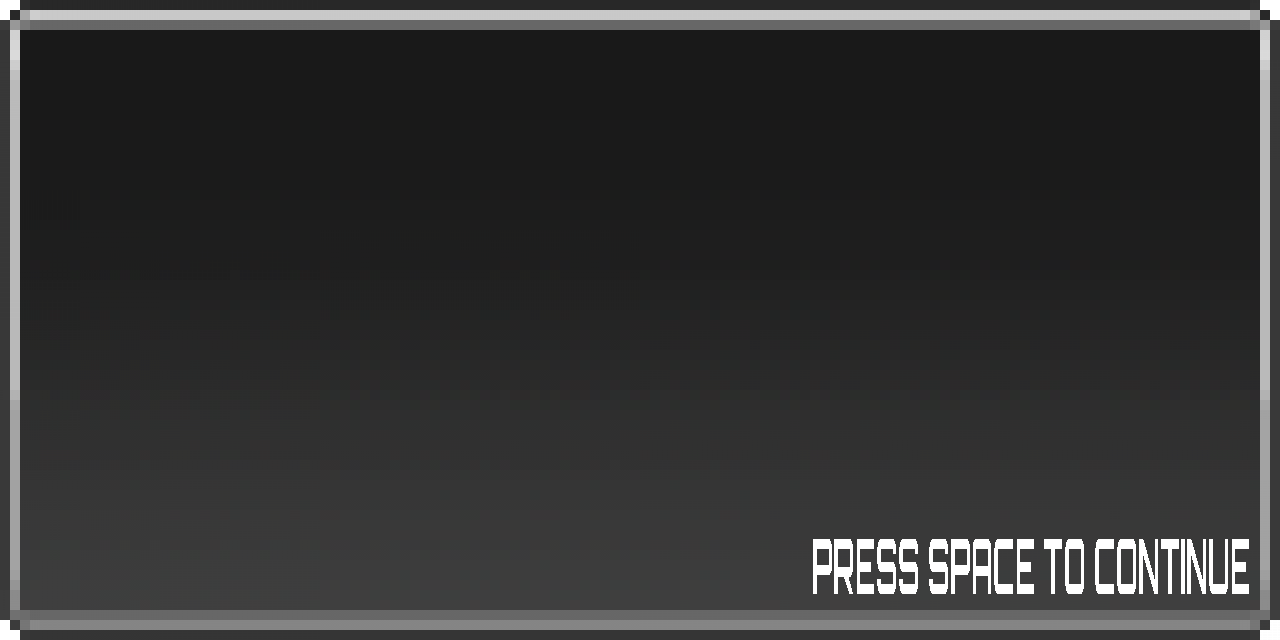
<style>
.page{position:relative;width:1280px;height:640px}
.page>*{position:absolute;margin:0}
.t1{font:75.3px "Orbitron-Bold";color:#ffffff;scale:0.35 1}
</style>
<div class="page">
<p class="t1" style="left:813px;top:539px;width:436px;height:55px">PRESS SPACE TO CONTINUE</p>
</div>
